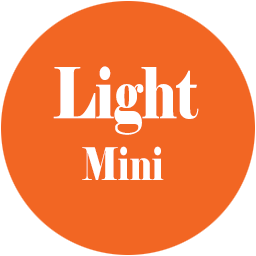
<style>
.page{position:relative;width:256px;height:256px;background:#f26623}
.page>*{position:absolute;margin:0}
.t1{font:70px "Elephant-Regular";color:#ffffff;scale:0.75 1}
.t2{font:45px "Elephant-Regular";color:#ffffff;scale:0.75 1}
</style>
<div class="page">
<p class="t1" style="left:53px;top:66px;width:146px;height:69px">Light</p>
<p class="t2" style="left:82px;top:146px;width:82px;height:34px">Mini</p>
</div>
